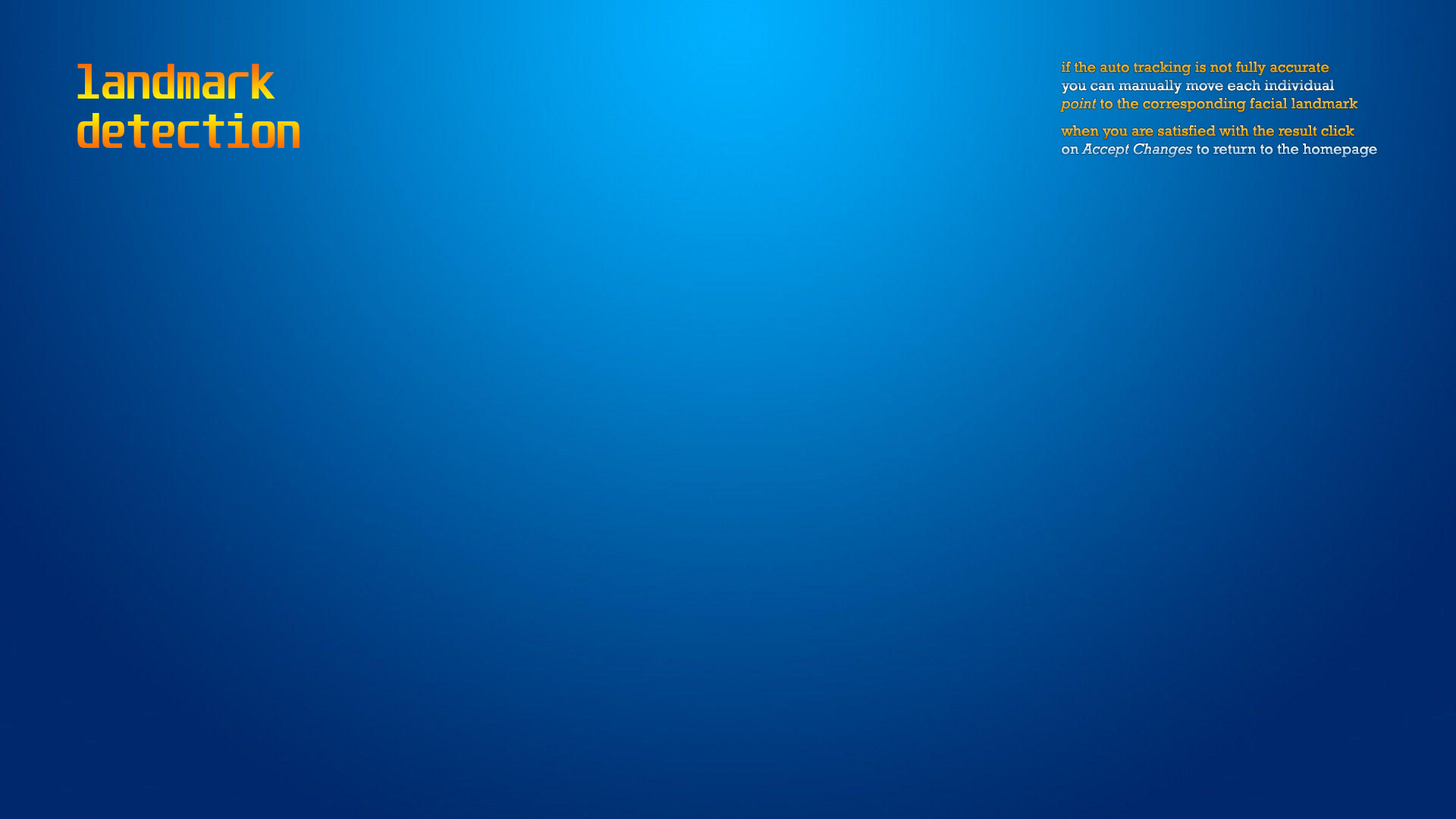
<style>
.page{position:relative;width:1456px;height:819px}
.page>*{position:absolute;margin:0}
.t1{font:40.9px "Unispace-Bold"}
.t2{font:15.2px "Rockwell"}
.t3{font:15.2px "Rockwell-Italic"}
</style>
<div class="page">
<p class="t1" style="left:77px;top:64px;width:223px;height:84px">landmark<br>detection</p>
<p class="t2" style="left:1060px;top:61px;width:298px;height:51px">if the auto tracking is not fully accurate<br>you can manually move each individual <br><span class="t3">point </span>to the corresponding facial landmark</p>
<p class="t2" style="left:1061px;top:125px;width:316px;height:33px">when you are satisfied with the result click <br>on <span class="t3">Accept Changes </span>to return to the homepage</p>
</div>
